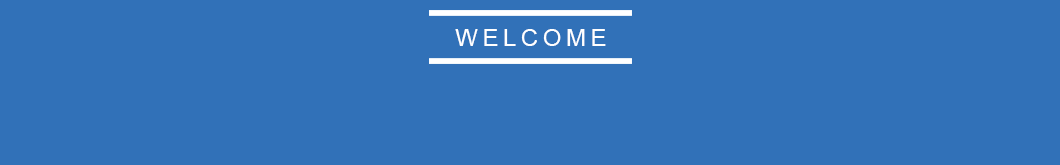
<style>
.page{position:relative;width:1060px;height:165px;background:#3171b8}
.page>*{position:absolute;margin:0}
.t1{font:24.2px "ArialMT";letter-spacing:0.19em;color:#ffffff}
</style>
<div class="page">
<p class="t1" style="left:455px;top:29px;width:151px;height:17px">WELCOME</p>
</div>
